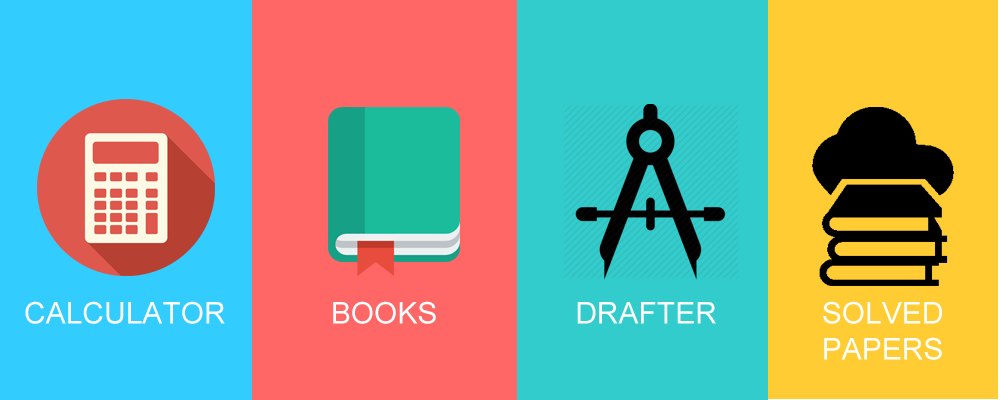
<style>
.page{position:relative;width:1000px;height:400px;background:#ff6666}
.page>*{position:absolute;margin:0}
.t1{font:30px "ArialMT";color:#ffffff}
</style>
<div class="page">
<p class="t1" style="left:25px;top:301px;width:200px;height:23px">CALCULATOR</p>
<p class="t1" style="left:333px;top:301px;width:103px;height:23px">BOOKS</p>
<p class="t1" style="left:577px;top:302px;width:139px;height:22px">DRAFTER</p>
<p class="t1" style="left:823px;top:301px;width:119px;height:59px;text-align:center">SOLVED PAPERS</p>
</div>
